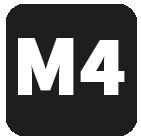
<style>
.page{position:relative;width:141px;height:140px;background:#1e1e1e}
.page>*{position:absolute;margin:0}
.t1{font:74.7px "NotoSansCJKhk-Black";color:#ffffff;font-weight:bold}
</style>
<div class="page">
<p class="t1" style="left:18px;top:38px;width:107px;height:57px">M4</p>
</div>
